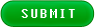
<style>
.page{position:relative;width:95px;height:27px}
.page>*{position:absolute;margin:0}
.t1{font:15px "Fixedsys";color:#ffffff}
</style>
<div class="page">
<p class="t1" style="left:21px;top:9px;width:54px;height:9px">SUBMIT</p>
</div>
